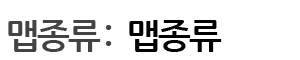
<style>
.page{position:relative;width:300px;height:60px;background:#ffffff}
.page>*{position:absolute;margin:0}
.t1{font:35px "NanumGothicBold";letter-spacing:-0.05em;color:#434343}
.t2{font:35px "NanumGothicBold";letter-spacing:-0.05em;color:#000000}
</style>
<div class="page">
<p class="t1" style="left:8px;top:20px;width:93px;height:32px">맵종류</p>
<p class="t1" style="left:105px;top:25px;width:7px;height:21px">:</p>
<p class="t2" style="left:129px;top:20px;width:93px;height:32px">맵종류</p>
</div>
